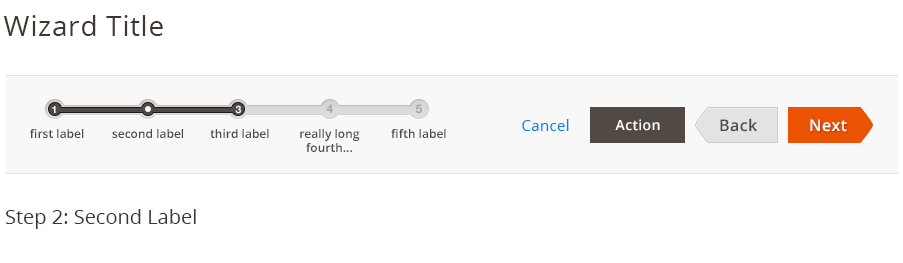
<style>
.page{position:relative;width:903px;height:263px;background:#ffffff}
.page>*{position:absolute;margin:0}
.t1{font:28px "OpenSans";letter-spacing:0.025em;color:#41362f}
.t2{font:10px "HelveticaNeue-Bold";color:#fefbfb}
.t3{font:12px "HelveticaNeue-Bold";color:#a6a6a6}
.t4{font:15px "OpenSans";letter-spacing:0.025em;color:#008bdb}
.t5{font:14px "OpenSans-Semibold";letter-spacing:0.025em;color:#ffffff}
.t6{font:16px "OpenSans-Semibold";letter-spacing:0.025em;color:#514943}
.t7{font:16px "OpenSans-Semibold";letter-spacing:0.025em;color:#fefefe}
.t8{font:12px "OpenSans-Semibold";color:#514943}
.t9{font:12px/14px "OpenSans-Semibold";color:#514943}
.t10{font:20px "OpenSans";color:#41362f}
</style>
<div class="page">
<p class="t1" style="left:3px;top:15px;width:160px;height:21px">Wizard Title</p>
<p class="t2" style="left:52px;top:106px;width:4px;height:7px">1</p>
<p class="t2" style="left:235px;top:105px;width:6px;height:9px">3</p>
<p class="t3" style="left:326px;top:104px;width:7px;height:9px">4</p>
<p class="t3" style="left:415px;top:104px;width:7px;height:10px">5</p>
<p class="t4" style="left:522px;top:119px;width:47px;height:12px">Cancel</p>
<p class="t5" style="left:615px;top:119px;width:45px;height:12px">Action</p>
<p class="t6" style="left:720px;top:118px;width:37px;height:14px">Back</p>
<p class="t7" style="left:810px;top:119px;width:37px;height:13px">Next</p>
<p class="t8" style="left:30px;top:129px;width:54px;height:9px">first label</p>
<p class="t8" style="left:112px;top:129px;width:71px;height:9px">second label</p>
<p class="t8" style="left:210px;top:129px;width:59px;height:9px">third label</p>
<p class="t9" style="left:300px;top:129px;width:60px;height:23px;text-align:center">really long <br>fourth...</p>
<p class="t8" style="left:391px;top:129px;width:55px;height:9px">fifth label</p>
<p class="t10" style="left:5px;top:209px;width:191px;height:20px">Step 2: Second Label</p>
</div>
